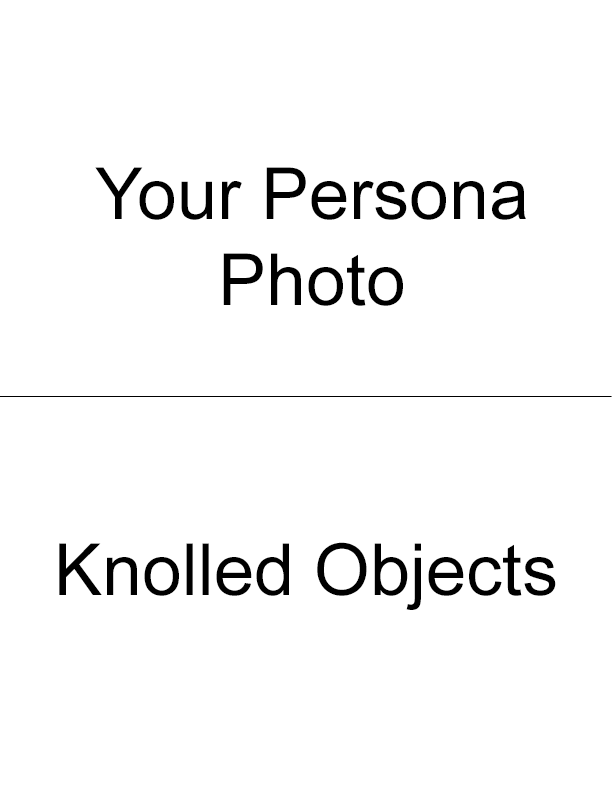
<style>
.page{position:relative;width:612px;height:792px;background:#ffffff}
.page>*{position:absolute;margin:0}
.t1{font:72px/86px "ArialMT";color:#000000}
.t2{font:72px "ArialMT";color:#000000}
</style>
<div class="page">
<p class="t1" style="left:95px;top:167px;width:431px;height:139px;text-align:center">Your Persona<br>Photo</p>
<p class="t2" style="left:59px;top:542px;width:497px;height:68px">Knolled Objects</p>
</div>
